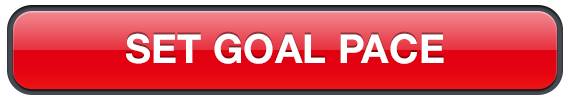
<style>
.page{position:relative;width:570px;height:100px}
.page>*{position:absolute;margin:0}
.t1{font:40px "HelveticaNeue-Bold";letter-spacing:0.005em;color:#ffffff}
</style>
<div class="page">
<p class="t1" style="left:126px;top:33px;width:318px;height:31px">SET GOAL PACE</p>
</div>
